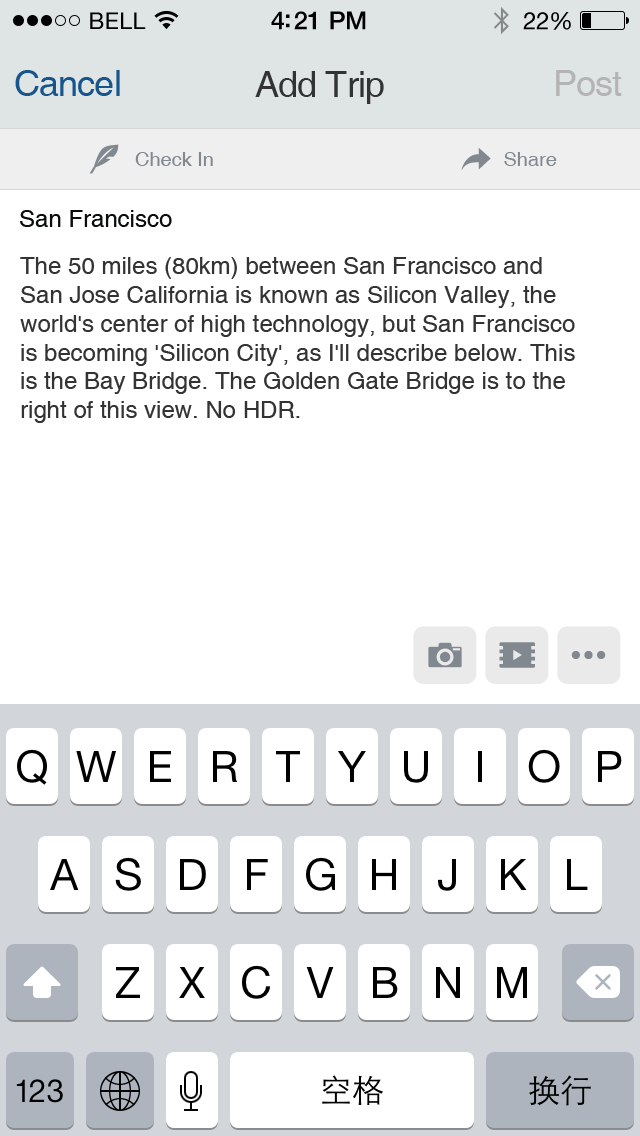
<style>
.page{position:relative;width:640px;height:1136px;background:#ffffff}
.page>*{position:absolute;margin:0}
.t1{font:36px "Helvetica";letter-spacing:-0.025em;color:#19558d}
.t2{font:36px "Helvetica";letter-spacing:-0.025em;color:#333333}
.t3{font:36px "Helvetica";letter-spacing:-0.025em;color:#b4b4b4}
.t4{font:20px "Helvetica";color:#81888f}
.t5{font:24px "Helvetica";color:#090e0c}
.t6{font:24px "Helvetica";color:#333333}
</style>
<div class="page">
<p class="t1" style="left:15px;top:70px;width:105px;height:26px">Cancel</p>
<p class="t2" style="left:255px;top:71px;width:129px;height:33px">Add Trip</p>
<p class="t3" style="left:556px;top:70px;width:66px;height:26px">Post</p>
<p class="t4" style="left:135px;top:152px;width:78px;height:14px">Check In</p>
<p class="t4" style="left:504px;top:152px;width:53px;height:14px">Share</p>
<p class="t5" style="left:20px;top:210px;width:152px;height:17px">San Francisco</p>
<p class="t6" style="left:20px;top:257px;width:555px;height:166px">The 50 miles (80km) between San Francisco and San Jose California is known as Silicon Valley, the world's center of high technology, but San Francisco is becoming 'Silicon City', as I'll describe below. This is the Bay Bridge. The Golden Gate Bridge is to the right of this view. No HDR.</p>
</div>
